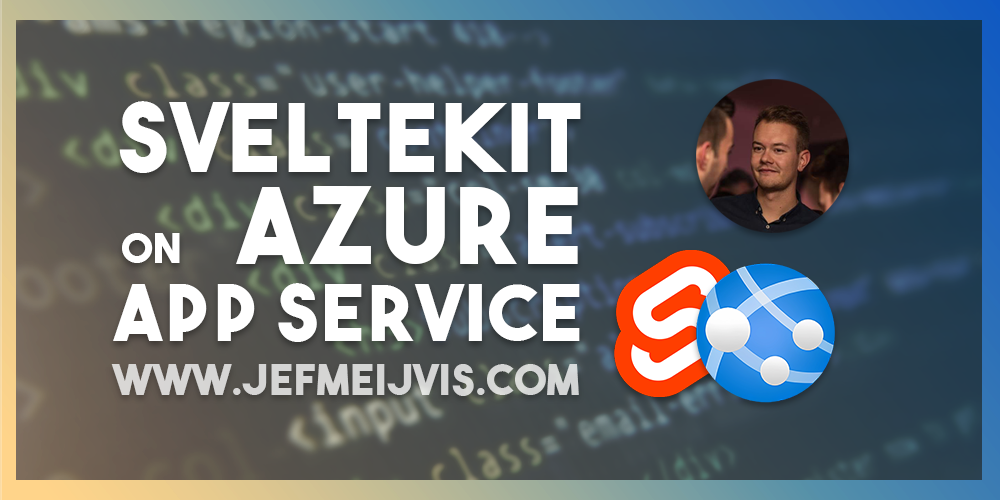
<style>
.page{position:relative;width:1000px;height:500px}
.page>*{position:absolute;margin:0}
.t1{font:93.9px "TheBoldFont";letter-spacing:0.04em;color:#ffffff}
.t2{font:105.3px "TheBoldFont";letter-spacing:0.04em;color:#ffffff}
.t3{font:41.1px "TheBoldFont";letter-spacing:0.04em;color:#ffffff}
.t4{font:77.4px "TheBoldFont";letter-spacing:0.04em;color:#ffffff}
.t5{font:41.6px "TheBoldFont";letter-spacing:0.04em;color:#d5d5d4}
</style>
<div class="page">
<p class="t1" style="left:119px;top:101px;width:462px;height:72px">Sveltekit</p>
<p class="t2" style="left:236px;top:186px;width:342px;height:78px">Azure</p>
<p class="t3" style="left:122px;top:233px;width:58px;height:30px">On</p>
<p class="t4" style="left:113px;top:283px;width:467px;height:59px">App service</p>
<p class="t5" style="left:111px;top:364px;width:468px;height:32px">www.jefmeijvis.com</p>
</div>
